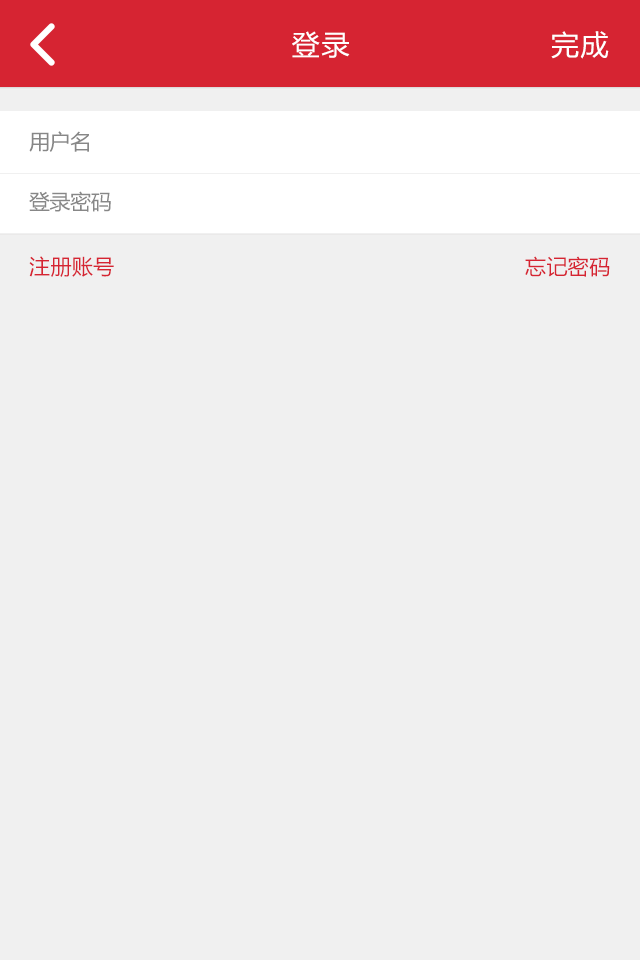
<style>
.page{position:relative;width:640px;height:960px;background:#f0f0f0}
.page>*{position:absolute;margin:0}
.t1{font:28px "MicrosoftYaHei";letter-spacing:0.06em;color:#ffffff}
.t2{font:21px "MicrosoftYaHei";letter-spacing:-0.02em;color:#878787}
.t3{font:21px "MicrosoftYaHei";letter-spacing:0.02em;color:#d62432}
</style>
<div class="page">
<p class="t1" style="left:292px;top:31px;width:58px;height:27px">登录</p>
<p class="t1" style="left:551px;top:31px;width:58px;height:28px">完成</p>
<p class="t2" style="left:29px;top:131px;width:60px;height:21px">用户名</p>
<p class="t2" style="left:29px;top:191px;width:82px;height:21px">登录密码</p>
<p class="t3" style="left:29px;top:256px;width:85px;height:21px">注册账号</p>
<p class="t3" style="left:525px;top:256px;width:85px;height:21px">忘记密码</p>
</div>
